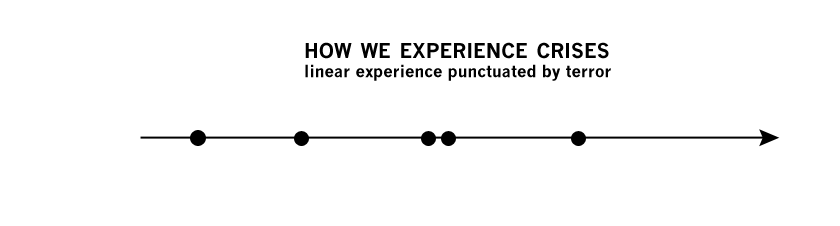
<style>
.page{position:relative;width:840px;height:226px;background:#ffffff}
.page>*{position:absolute;margin:0}
.t1{font:16.5px/19.3px "NewsGothicMT-Bold";color:#000000}
.t2{font:28.5px/49.4px "NewsGothicMT-Bold";color:#000000;font-variant:small-caps}
</style>
<div class="page">
<p class="t1" style="left:305px;top:42px;width:306px;height:39px"><span class="t2">how we experience crises<br></span>linear experience punctuated by terror</p>
</div>
